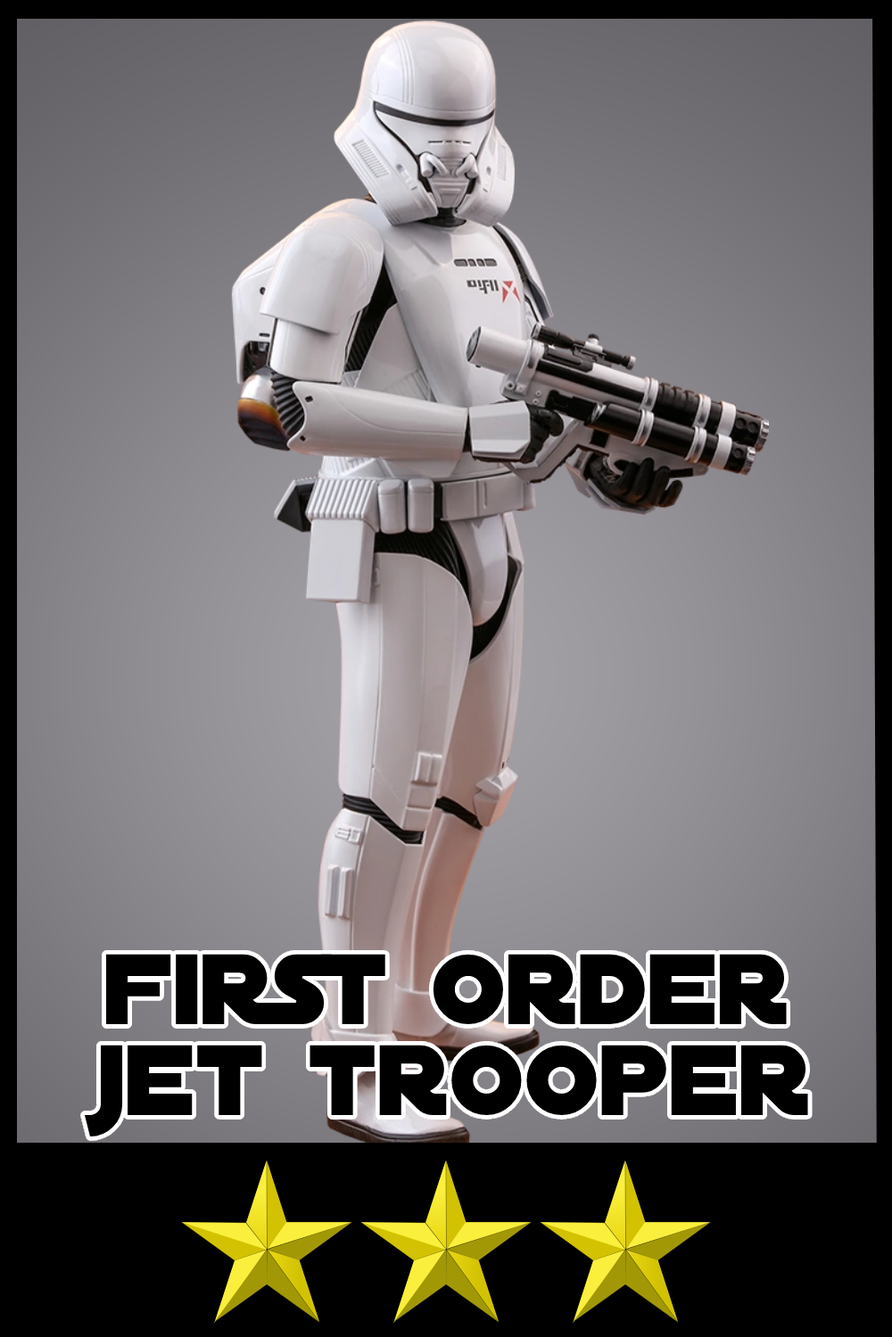
<style>
.page{position:relative;width:892px;height:1337px;background:#000000}
.page>*{position:absolute;margin:0}
.t1{font:107.2px/90.9px "DistantGalaxy";color:#000000}
</style>
<div class="page">
<p class="t1" style="left:85px;top:954px;width:723px;height:183px;text-align:center">first order<br>jet trooper</p>
</div>
